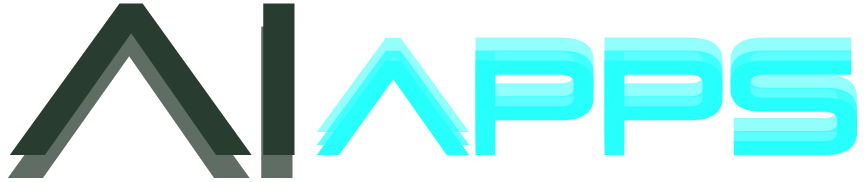
<style>
.page{position:relative;width:866px;height:182px;background:#ffffff}
.page>*{position:absolute;margin:0}
.t1{font:215.2px "PirulenRg-Regular";letter-spacing:-0.02em;color:#293c30;scale:1.09 1}
.t2{font:215.2px "PirulenRg-Regular";letter-spacing:-0.02em;scale:1.09 1}
.t3{font:133.8px "PirulenRg-Regular";letter-spacing:-0.02em;scale:1.1 1}
.t4{font:133.8px "PirulenRg-Regular";letter-spacing:-0.02em;color:#26fffc;scale:1.1 1}
</style>
<div class="page">
<p class="t1" style="left:10px;top:3px;width:285px;height:152px">ai</p>
<p class="t1" style="left:10px;top:3px;width:285px;height:152px">aI</p>
<p class="t2" style="left:8px;top:26px;width:285px;height:152px">ai</p>
<p class="t2" style="left:8px;top:26px;width:285px;height:152px">ai</p>
<p class="t3" style="left:317px;top:50px;width:540px;height:96px">apps</p>
<p class="t3" style="left:317px;top:50px;width:540px;height:96px">apps</p>
<p class="t4" style="left:317px;top:60px;width:540px;height:96px">apps</p>
<p class="t4" style="left:317px;top:60px;width:540px;height:96px">apps</p>
</div>
